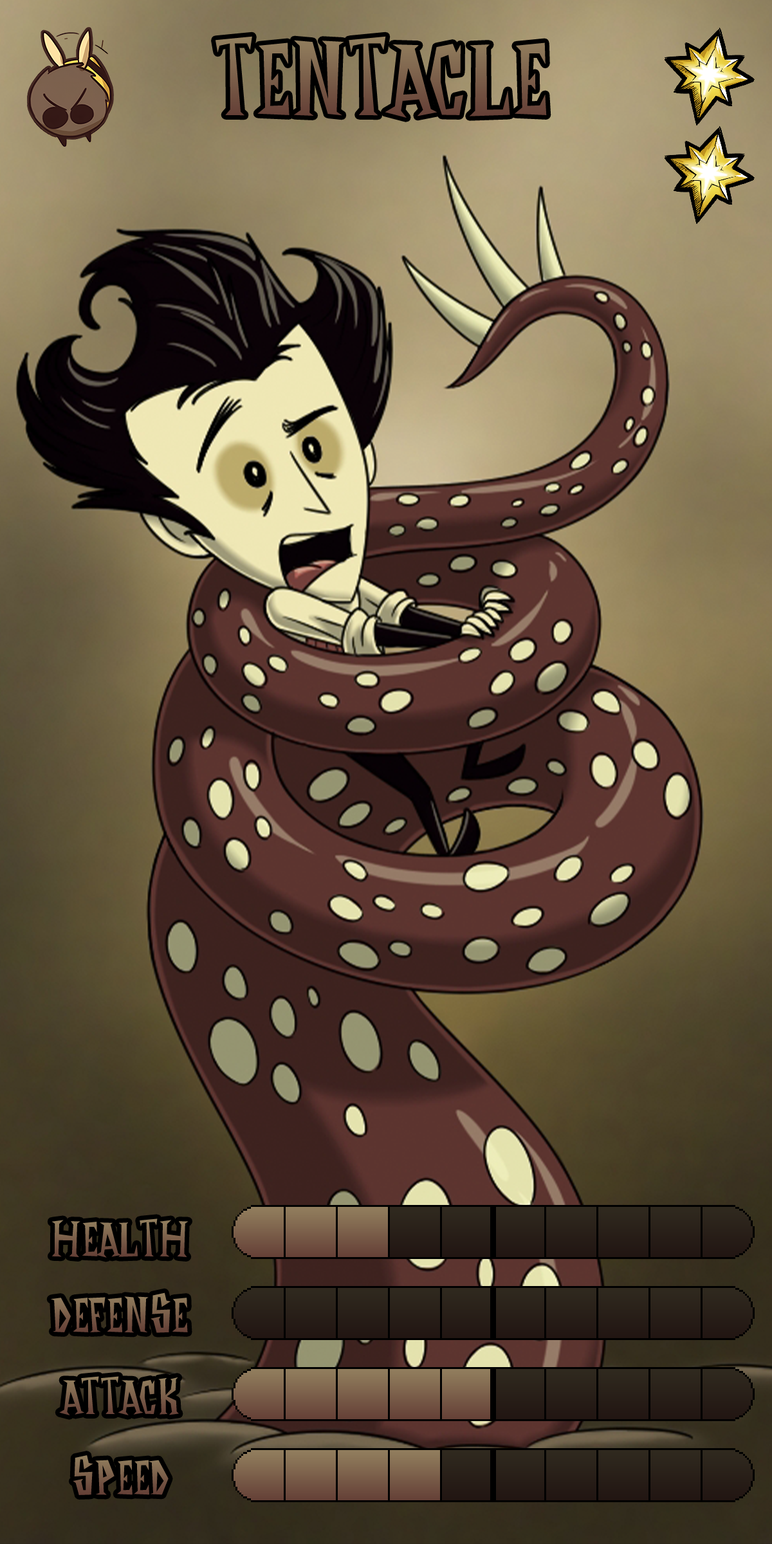
<style>
.page{position:relative;width:772px;height:1544px}
.page>*{position:absolute;margin:0}
.t1{font:194.3px "DontStarveNameFont"}
.t2{font:92.7px "DontStarveNameFont"}
</style>
<div class="page">
<p class="t1" style="left:216px;top:36px;width:331px;height:82px">Tentacle</p>
<p class="t2" style="left:51px;top:1219px;width:138px;height:39px">Health</p>
<p class="t2" style="left:51px;top:1293px;width:137px;height:40px">Defense</p>
<p class="t2" style="left:59px;top:1376px;width:120px;height:40px">Attack</p>
<p class="t2" style="left:73px;top:1456px;width:96px;height:39px">Speed</p>
</div>
